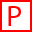
<style>
.page{position:relative;width:32px;height:32px;background:#ffffff}
.page>*{position:absolute;margin:0}
.t1{font:29.2px "MyriadPro-Regular";color:#fe0000}
</style>
<div class="page">
<p class="t1" style="left:8px;top:6px;width:13px;height:20px">P</p>
</div>
